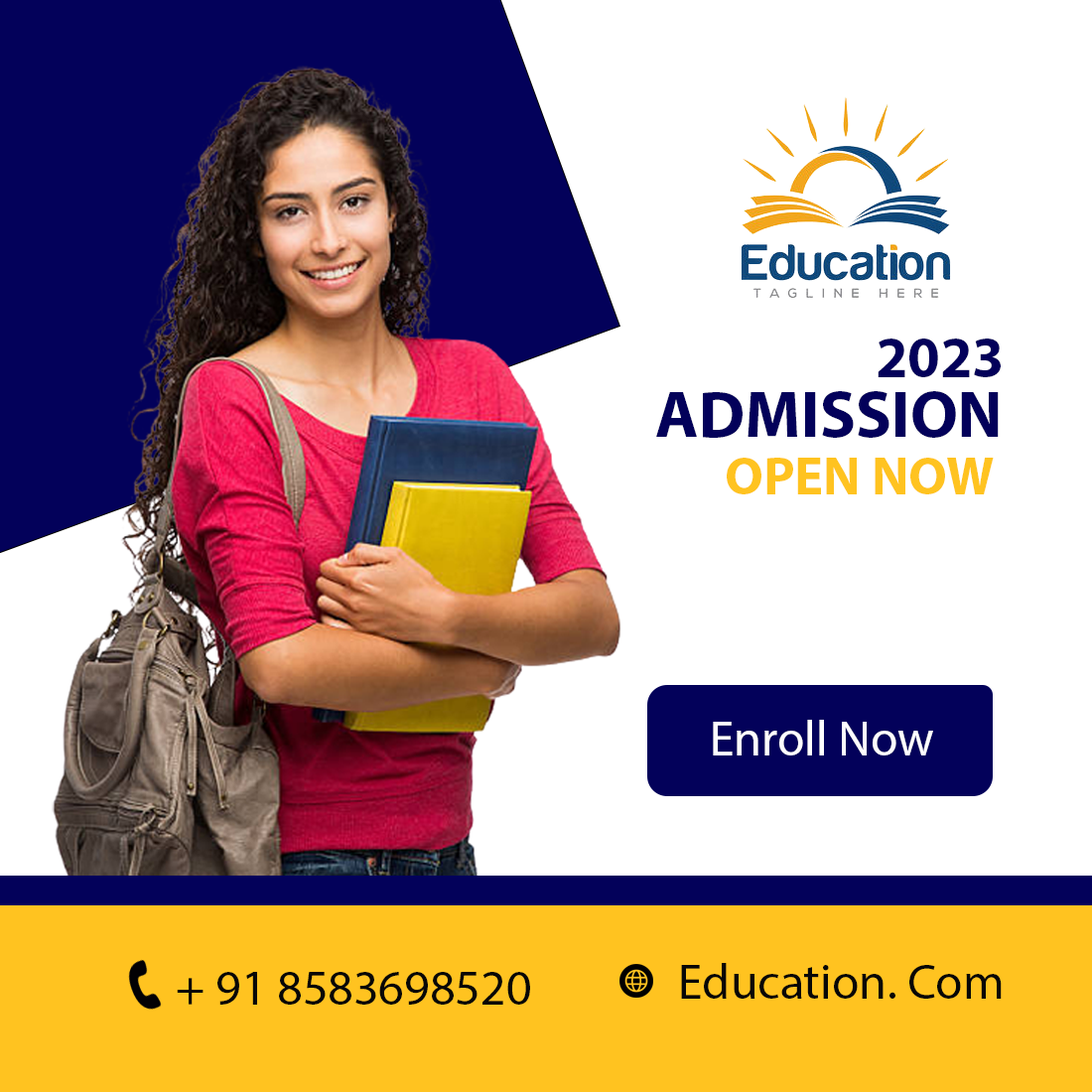
<style>
.page{position:relative;width:1092px;height:1092px;background:#ffffff}
.page>*{position:absolute;margin:0}
.t1{font:57.9px "MyriadPro-Bold";color:#03015a}
.t2{font:66.2px "MyriadPro-Bold";color:#03015a}
.t3{font:53.8px "MyriadPro-Bold";color:#ffc320}
.t4{font:49.6px "MyriadPro-Regular";color:#fefefe}
.t5{font:49.6px "MyriadPro-Regular";color:#070707}
</style>
<div class="page">
<p class="t1" style="left:878px;top:339px;width:123px;height:38px">2023</p>
<p class="t2" style="left:656px;top:391px;width:343px;height:47px">ADMISSION</p>
<p class="t3" style="left:727px;top:458px;width:267px;height:36px">OPEN NOW</p>
<p class="t4" style="left:713px;top:720px;width:220px;height:35px">Enroll Now</p>
<p class="t5" style="left:681px;top:963px;width:321px;height:36px">Education. Com</p>
<p class="t5" style="left:177px;top:972px;width:353px;height:33px">+ 91 8583698520</p>
</div>
